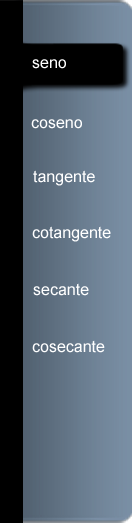
<style>
.page{position:relative;width:132px;height:523px;background:#000000}
.page>*{position:absolute;margin:0}
.t1{font:16px "ArialMT";color:#ffffff}
</style>
<div class="page">
<p class="t1" style="left:32px;top:59px;width:34px;height:10px">seno</p>
<p class="t1" style="left:31px;top:119px;width:51px;height:10px">coseno</p>
<p class="t1" style="left:33px;top:170px;width:62px;height:16px">tangente</p>
<p class="t1" style="left:32px;top:226px;width:79px;height:16px">cotangente</p>
<p class="t1" style="left:33px;top:283px;width:56px;height:13px">secante</p>
<p class="t1" style="left:32px;top:340px;width:73px;height:13px">cosecante</p>
</div>
